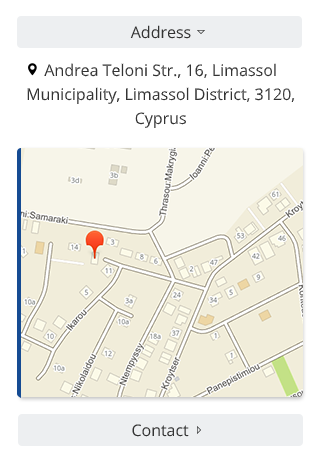
<style>
.page{position:relative;width:320px;height:470px;background:#ffffff}
.page>*{position:absolute;margin:0}
.t1{font:16px "OpenSans-Regular";color:#333333}
.t2{font:16px/24px "OpenSans-Regular";color:#333333}
</style>
<div class="page">
<p class="t1" style="left:130px;top:25px;width:61px;height:14px">Address</p>
<p class="t2" style="left:27px;top:63px;width:268px;height:65px;text-align:center">Andrea Teloni Str., 16, Limassol<br>Municipality, Limassol District, 3120,<br>Cyprus</p>
<p class="t1" style="left:132px;top:424px;width:57px;height:13px">Contact</p>
</div>
